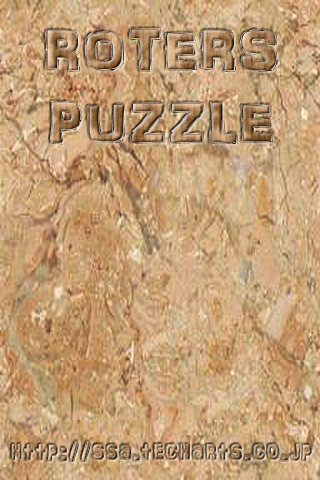
<style>
.page{position:relative;width:320px;height:480px}
.page>*{position:absolute;margin:0}
.t1{font:28px/72px "ARDARLING"}
.t2{font:60px/72px "ARDARLING"}
</style>
<div class="page">
<p class="t1" style="left:11px;top:28px;width:301px;height:434px;text-align:center"><span class="t2">ROTERS<br>PUZZLE<br><br><br><br><br></span>http://ssa.techarts.co.jp</p>
</div>
